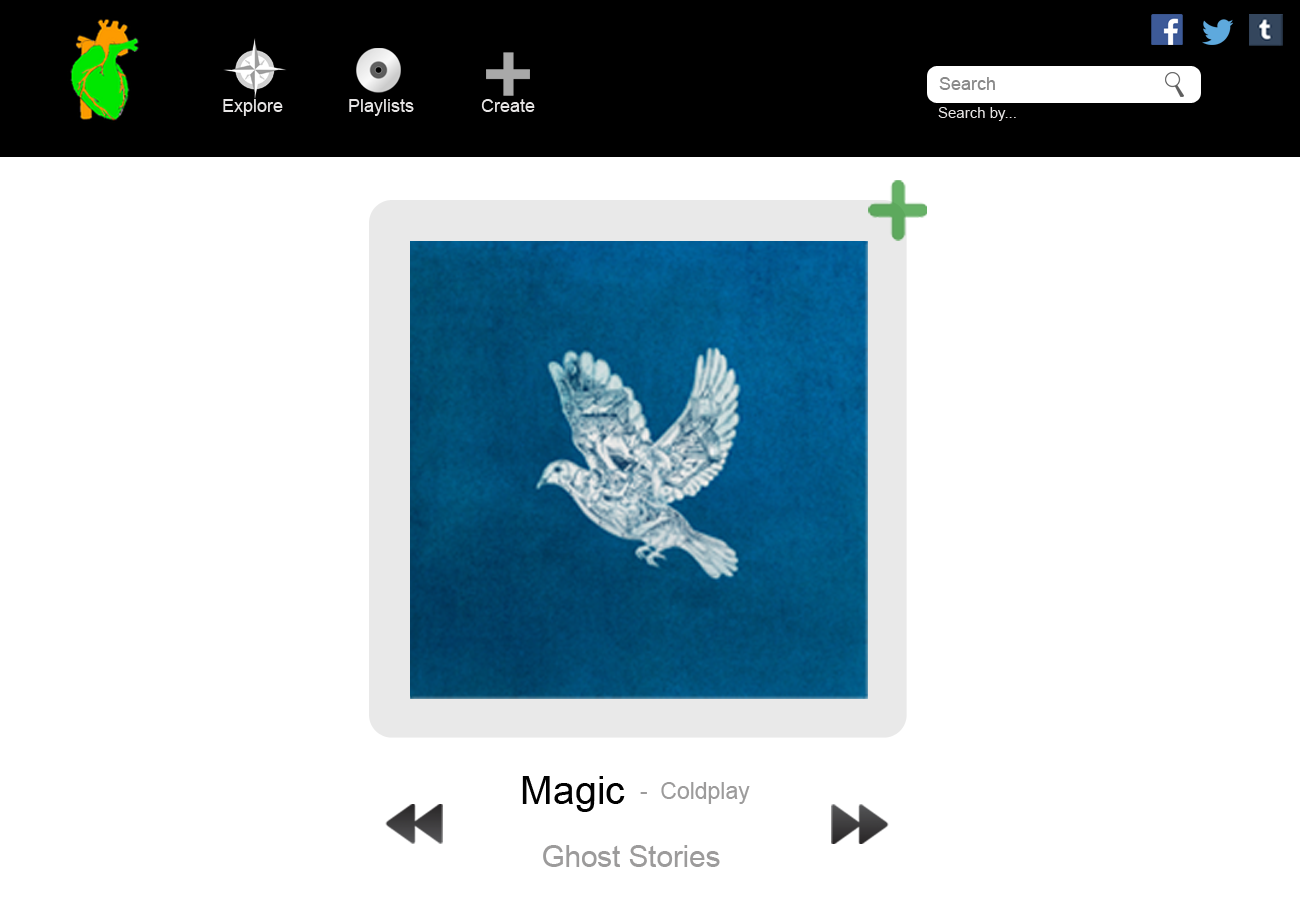
<style>
.page{position:relative;width:1300px;height:900px;background:#ffffff}
.page>*{position:absolute;margin:0}
.t1{font:18px "ArialMT";color:#898989}
.t2{font:18px "ArialMT";color:#e7e5e5}
.t3{font:15px "ArialMT";color:#e7e5e5}
.t4{font:39.4px "ArialMT";color:#010101}
.t5{font:23px "ArialMT";color:#9c9b9b}
.t6{font:29.6px "ArialMT";color:#9c9b9b}
</style>
<div class="page">
<p class="t1" style="left:939px;top:77px;width:56px;height:13px">Search</p>
<p class="t2" style="left:223px;top:99px;width:60px;height:17px">Explore</p>
<p class="t2" style="left:349px;top:99px;width:65px;height:17px">Playlists</p>
<p class="t2" style="left:481px;top:99px;width:54px;height:13px">Create</p>
<p class="t3" style="left:938px;top:107px;width:78px;height:14px">Search by...</p>
<p class="t4" style="left:522px;top:776px;width:103px;height:36px">Magic</p>
<p class="t5" style="left:640px;top:782px;width:110px;height:22px">-  Coldplay</p>
<p class="t6" style="left:543px;top:845px;width:177px;height:22px">Ghost Stories</p>
</div>
